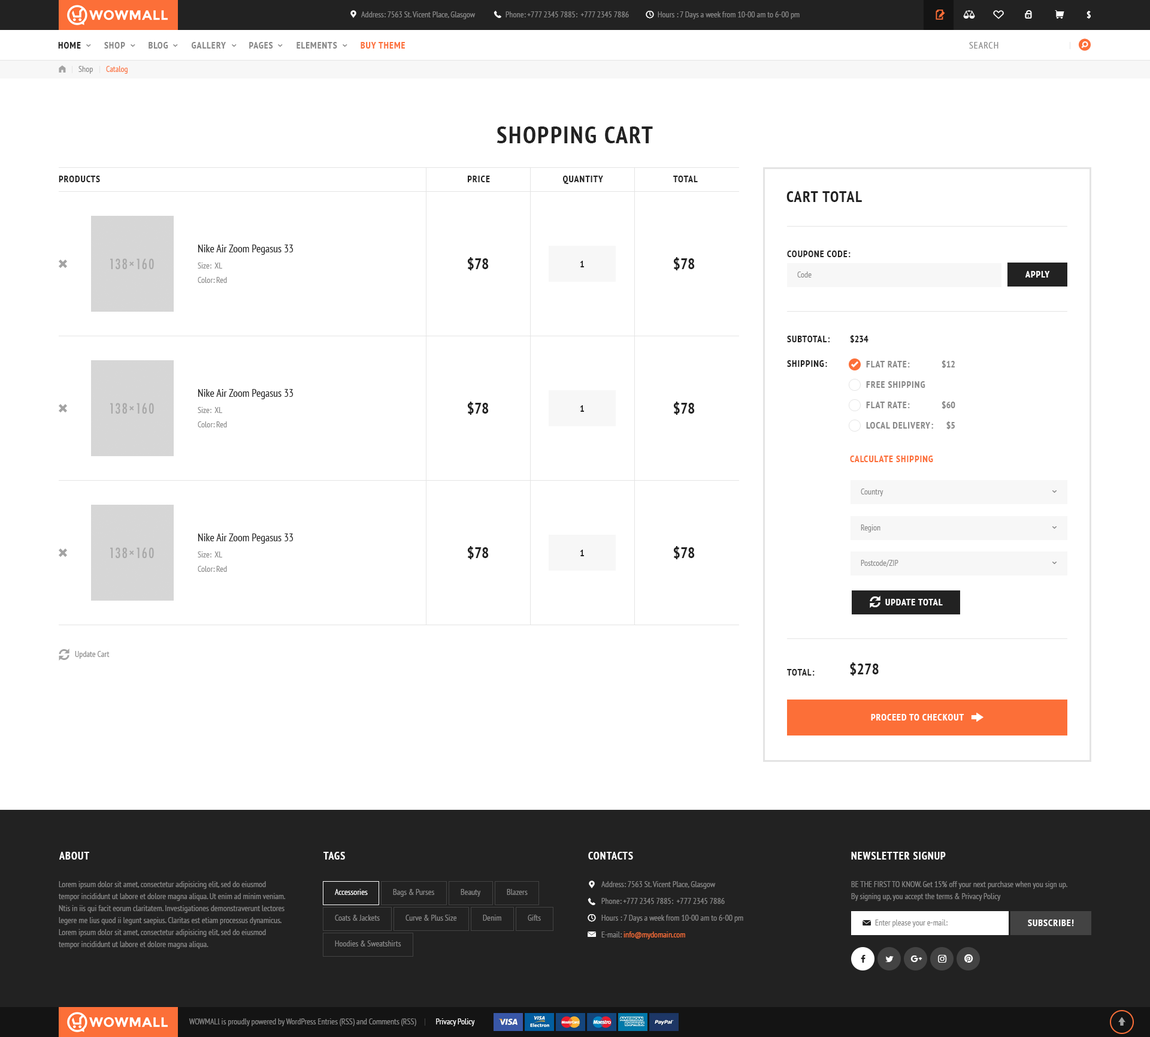
<style>
.page{position:relative;width:1150px;height:1037px;background:#ffffff}
.page>*{position:absolute;margin:0}
.t1{font:8.4px "PTSans-Narrow";color:#888888}
.t2{font:9.6px "PTSans-NarrowBold";letter-spacing:0.06em;color:#ffffff;text-transform:uppercase}
.t3{font:9.6px "PTSans-NarrowBold";letter-spacing:0.06em;color:#888888;text-transform:uppercase}
.t4{font:9.6px "PTSans-NarrowBold";letter-spacing:0.06em;color:#222222;text-transform:uppercase}
.t5{font:9.6px "PTSans-NarrowBold";letter-spacing:0.06em;color:#fc6f38;text-transform:uppercase}
.t6{font:9.6px "PTSans-Narrow";letter-spacing:0.06em;color:#888888;text-transform:uppercase}
.t7{font:8.4px "PTSans-Narrow";color:#fc6f38}
.t8{font:24px "PTSans-NarrowBold";letter-spacing:0.06em;color:#222222;text-transform:uppercase}
.t9{font:15.6px "PTSans-NarrowBold";letter-spacing:0.06em;color:#222222;text-transform:uppercase}
.t10{font:10.8px "PTSans-Narrow";color:#222222}
.t11{font:15.6px "PTSans-NarrowBold";color:#222222;text-transform:uppercase}
.t12{font:8.4px/14.4px "PTSans-Narrow";color:#888888}
.t13{font:9.6px "PTSans-NarrowBold";color:#222222;text-transform:uppercase}
.t14{font:9.6px/20.4px "PTSans-NarrowBold";letter-spacing:0.06em;color:#888888;text-transform:uppercase}
.t15{font:9.6px/20.4px "PTSans-NarrowBold";color:#888888;text-transform:uppercase}
.t16{font:10.8px "PTSans-NarrowBold";letter-spacing:0.06em;color:#ffffff;text-transform:uppercase}
.t17{font:8.4px/12px "PTSans-Narrow";color:#888888}
.t18{font:8.4px/16.8px "PTSans-Narrow";color:#888888}
.t19{font:8.4px/16.8px "PTSans-Narrow";color:#fc6f38}
.t20{font:8.4px "PTSans-Narrow";color:#ffffff}
</style>
<div class="page">
<p class="t1" style="left:361px;top:11px;width:115px;height:8px">Address: 7563 St. Vicent Place, Glasgow</p>
<p class="t1" style="left:506px;top:11px;width:123px;height:6px">Phone: +777 2345 7885:  +777 2345 7886</p>
<p class="t1" style="left:658px;top:11px;width:142px;height:8px">Hours : 7 Days a week from 10-00 am to 6-00 pm</p>
<p class="t2" style="left:1087px;top:11px;width:4px;height:8px">$</p>
<p class="t3" style="left:58px;top:42px;width:347px;height:7px"><span class="t4">Home </span>        Shop         Blog         Gallery         Pages         elements         <span class="t5">Buy Theme</span></p>
<p class="t6" style="left:969px;top:42px;width:30px;height:7px">Search</p>
<p class="t1" style="left:78px;top:66px;width:15px;height:8px">Shop</p>
<p class="t7" style="left:106px;top:66px;width:22px;height:8px">Catalog</p>
<p class="t8" style="left:497px;top:126px;width:156px;height:17px">Shopping Cart</p>
<p class="t4" style="left:59px;top:176px;width:41px;height:6px">Products</p>
<p class="t4" style="left:467px;top:176px;width:23px;height:6px">price</p>
<p class="t4" style="left:563px;top:176px;width:40px;height:8px">quantity</p>
<p class="t4" style="left:673px;top:176px;width:25px;height:6px">total</p>
<p class="t9" style="left:787px;top:191px;width:75px;height:11px">Cart total</p>
<p class="t10" style="left:198px;top:244px;width:96px;height:11px">Nike Air Zoom Pegasus 33</p>
<p class="t11" style="left:467px;top:257px;width:22px;height:13px">$78</p>
<p class="t11" style="left:673px;top:257px;width:22px;height:13px">$78</p>
<p class="t4" style="left:787px;top:250px;width:64px;height:7px">Coupone code:</p>
<p class="t12" style="left:198px;top:262px;width:29px;height:21px">Size:  XL<br>Color: Red</p>
<p class="t4" style="left:580px;top:261px;width:4px;height:6px">1</p>
<p class="t1" style="left:797px;top:271px;width:15px;height:6px">Code</p>
<p class="t2" style="left:1026px;top:271px;width:24px;height:6px">Apply</p>
<p class="t4" style="left:787px;top:336px;width:43px;height:6px">SUBTOTAL:</p>
<p class="t13" style="left:850px;top:335px;width:19px;height:8px">$234</p>
<p class="t4" style="left:787px;top:360px;width:40px;height:7px">SHIPPING:</p>
<p class="t14" style="left:866px;top:361px;width:67px;height:67px">Flat Rate:         <br>Free Shipping<br>Flat Rate: <br>Local Delivery:</p>
<p class="t15" style="left:942px;top:360px;width:14px;height:69px;text-align:right">$12<br><br>$60<br>$5</p>
<p class="t10" style="left:198px;top:389px;width:96px;height:10px">Nike Air Zoom Pegasus 33</p>
<p class="t11" style="left:467px;top:401px;width:22px;height:14px">$78</p>
<p class="t11" style="left:673px;top:401px;width:22px;height:14px">$78</p>
<p class="t12" style="left:198px;top:407px;width:29px;height:20px">Size:  XL<br>Color: Red</p>
<p class="t4" style="left:580px;top:405px;width:4px;height:7px">1</p>
<p class="t5" style="left:850px;top:455px;width:83px;height:7px">CALCULATE SHIPPING</p>
<p class="t1" style="left:861px;top:488px;width:23px;height:8px">Country</p>
<p class="t10" style="left:198px;top:533px;width:96px;height:10px">Nike Air Zoom Pegasus 33</p>
<p class="t1" style="left:861px;top:524px;width:20px;height:8px">Region</p>
<p class="t11" style="left:467px;top:546px;width:22px;height:13px">$78</p>
<p class="t11" style="left:673px;top:546px;width:22px;height:13px">$78</p>
<p class="t12" style="left:198px;top:551px;width:29px;height:21px">Size:  XL<br>Color: Red</p>
<p class="t4" style="left:580px;top:549px;width:4px;height:7px">1</p>
<p class="t1" style="left:861px;top:560px;width:38px;height:7px">Postcode/ZIP</p>
<p class="t2" style="left:886px;top:599px;width:57px;height:6px">Update total</p>
<p class="t1" style="left:75px;top:651px;width:35px;height:7px">Update Cart</p>
<p class="t11" style="left:850px;top:662px;width:29px;height:13px">$278</p>
<p class="t4" style="left:787px;top:669px;width:28px;height:6px">TOTAL:</p>
<p class="t2" style="left:871px;top:714px;width:94px;height:6px">PROCEED TO CHECKOUT</p>
<p class="t16" style="left:59px;top:851px;width:30px;height:8px">About</p>
<p class="t16" style="left:324px;top:851px;width:21px;height:8px">Tags</p>
<p class="t16" style="left:588px;top:851px;width:45px;height:8px">Contacts</p>
<p class="t16" style="left:851px;top:851px;width:95px;height:8px">NEWSLETTER SIGNUP</p>
<p class="t17" style="left:59px;top:881px;width:227px;height:67px">Lorem ipsum dolor sit amet, consectetur adipisicing elit, sed do eiusmod tempor incididunt ut labore et dolore magna aliqua. Ut enim ad minim veniam. Ntis in iis qui facit eorum claritatem. Investigationes demonstraverunt lectores legere me lius quod ii legunt saepius. Claritas est etiam processus dynamicus. Lorem ipsum dolor sit amet, consectetur adipisicing elit, sed do eiusmod tempor incididunt ut labore et dolore magna aliqua.</p>
<p class="t18" style="left:602px;top:881px;width:142px;height:58px">Address: 7563 St. Vicent Place, Glasgow<br>Phone: +777 2345 7885:  +777 2345 7886<br>Hours : 7 Days a week from 10-00 am to 6-00 pm<br>E-mail: <span class="t19">info@mydomain.com</span></p>
<p class="t17" style="left:851px;top:881px;width:217px;height:20px">BE THE FIRST TO KNOW. Get 15% off your next purchase when you sign up. <br>By signing up, you accept the terms &amp; Privacy Policy</p>
<p class="t20" style="left:335px;top:889px;width:33px;height:6px">Accessories</p>
<p class="t1" style="left:393px;top:889px;width:41px;height:7px">Bags &amp; Purses</p>
<p class="t1" style="left:461px;top:889px;width:20px;height:7px">Beauty</p>
<p class="t1" style="left:507px;top:889px;width:21px;height:6px">Blazers</p>
<p class="t1" style="left:335px;top:914px;width:45px;height:6px">Coats &amp; Jackets</p>
<p class="t1" style="left:406px;top:914px;width:51px;height:6px">Curve &amp; Plus Size</p>
<p class="t1" style="left:483px;top:914px;width:18px;height:6px">Denim</p>
<p class="t1" style="left:528px;top:914px;width:13px;height:6px">Gifts</p>
<p class="t1" style="left:875px;top:919px;width:73px;height:8px">Enter please your e-mail:</p>
<p class="t2" style="left:1028px;top:919px;width:46px;height:7px">Subscribe!</p>
<p class="t1" style="left:335px;top:940px;width:66px;height:6px">Hoodies &amp; Sweatshirts</p>
<p class="t1" style="left:189px;top:1018px;width:286px;height:8px">WOWMALl is proudly powered by WordPress Entries (RSS) and Comments (RSS)           <span class="t20">Privacy Policy</span></p>
</div>
